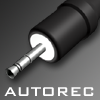
<style>
.page{position:relative;width:100px;height:100px}
.page>*{position:absolute;margin:0}
.t1{font:16.7px "BankGothicBT-Medium";color:#ffffff}
</style>
<div class="page">
<p class="t1" style="left:4px;top:87px;width:90px;height:9px">AUTOREC</p>
</div>
